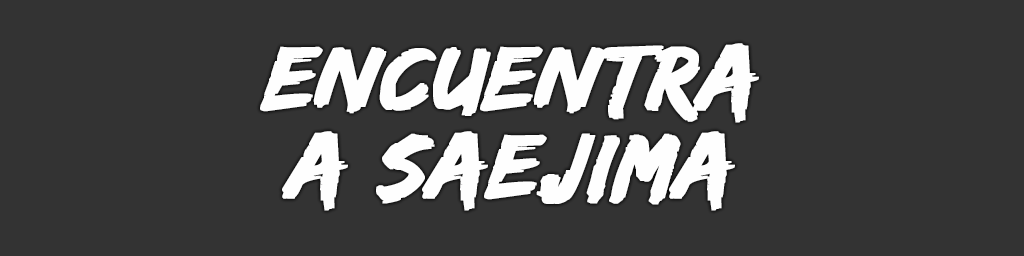
<style>
.page{position:relative;width:1024px;height:256px;background:#333333}
.page>*{position:absolute;margin:0}
.t1{font:94px/88px "EdoSZ";color:#fefefe;font-weight:bold;font-style:italic;scale:1.04 1}
</style>
<div class="page">
<p class="t1" style="left:260px;top:43px;width:499px;height:168px;text-align:center">encuentra<br>a saejima</p>
</div>
